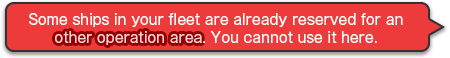
<style>
.page{position:relative;width:450px;height:58px;background:#ed3b3b}
.page>*{position:absolute;margin:0}
.t1{font:14px/18px "GothicMB101Pro-Regular";color:#ffffff}
.t2{font:14px/18px "GothicMB101Pro-Regular";color:#ffd3d3}
</style>
<div class="page">
<p class="t1" style="left:29px;top:13px;width:374px;height:32px;text-align:center">Some ships in your fleet are already reserved for an<br><span class="t2">other operation area</span>. You cannot use it here.</p>
<p class="t1" style="left:29px;top:13px;width:374px;height:32px;text-align:center">Some ships in your fleet are already reserved for an<br><span class="t2">other operation area</span>. You cannot use it here.</p>
</div>
